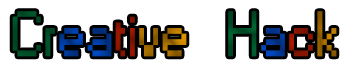
<style>
.page{position:relative;width:350px;height:69px;background:#ffffff}
.page>*{position:absolute;margin:0}
.t1{font:60px "Small Fonts"}
</style>
<div class="page">
<p class="t1" style="left:12px;top:11px;width:325px;height:46px">Creative    Hack</p>
</div>
